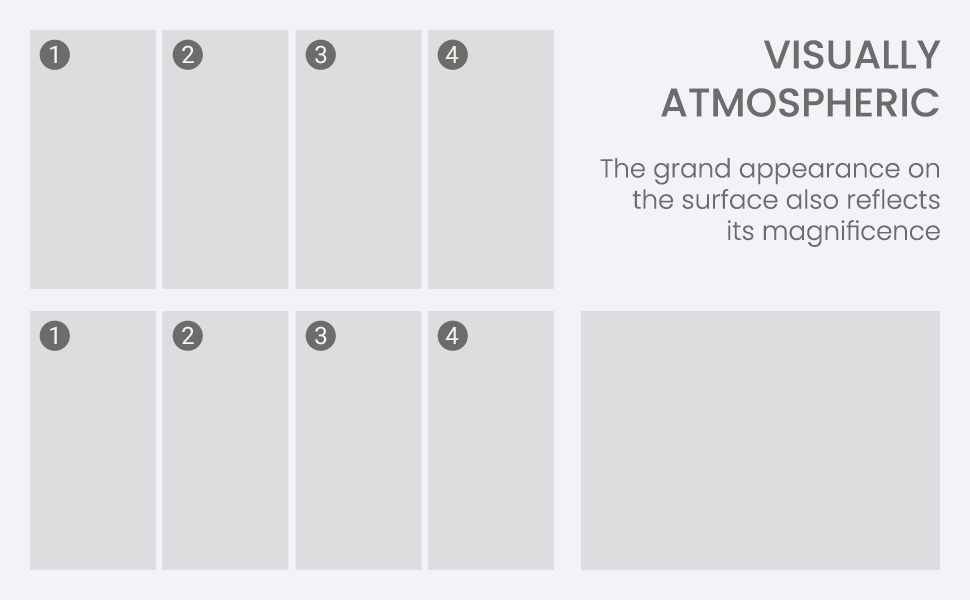
<style>
.page{position:relative;width:970px;height:600px;background:#dcdddf}
.page>*{position:absolute;margin:0}
.t1{font:40px "Poppins-Medium";color:#6c6c6c}
.t2{font:24px "Roboto-Regular";color:#faf5ec}
.t3{font:26px "Poppins-Light";color:#6c6c6c}
</style>
<div class="page">
<p class="t1" style="left:661px;top:40px;width:280px;height:77px;text-align:right">VISUALLY<br>ATMOSPHERIC</p>
<p class="t2" style="left:50px;top:45px;width:7px;height:18px">1</p>
<p class="t2" style="left:182px;top:45px;width:12px;height:18px">2</p>
<p class="t2" style="left:315px;top:45px;width:12px;height:19px">3</p>
<p class="t2" style="left:445px;top:46px;width:14px;height:17px">4</p>
<p class="t3" style="left:600px;top:158px;width:340px;height:89px;text-align:right">The grand appearance on<br> the surface also reflects<br>its magnificence</p>
<p class="t2" style="left:50px;top:326px;width:7px;height:18px">1</p>
<p class="t2" style="left:182px;top:326px;width:12px;height:18px">2</p>
<p class="t2" style="left:315px;top:326px;width:12px;height:19px">3</p>
<p class="t2" style="left:445px;top:327px;width:14px;height:17px">4</p>
</div>
